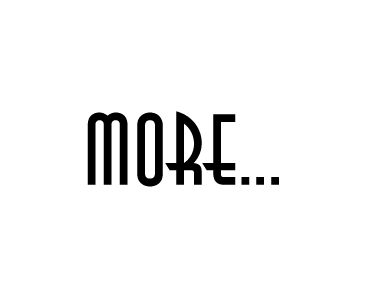
<style>
.page{position:relative;width:365px;height:300px;background:#ffffff}
.page>*{position:absolute;margin:0}
.t1{font:100px "AnnaStd";color:#000000}
</style>
<div class="page">
<p class="t1" style="left:87px;top:111px;width:192px;height:76px">More...</p>
</div>
